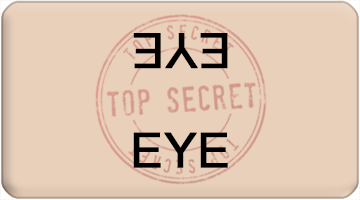
<style>
.page{position:relative;width:360px;height:200px;background:#e8d0bb}
.page>*{position:absolute;margin:0}
.t1{font:48px "ArialMT";color:#000000;font-weight:bold}
</style>
<div class="page">
<p class="t1" style="left:133px;top:33px;width:95px;height:36px;rotate:180deg">EYE</p>
<p class="t1" style="left:133px;top:132px;width:95px;height:36px">EYE</p>
</div>
